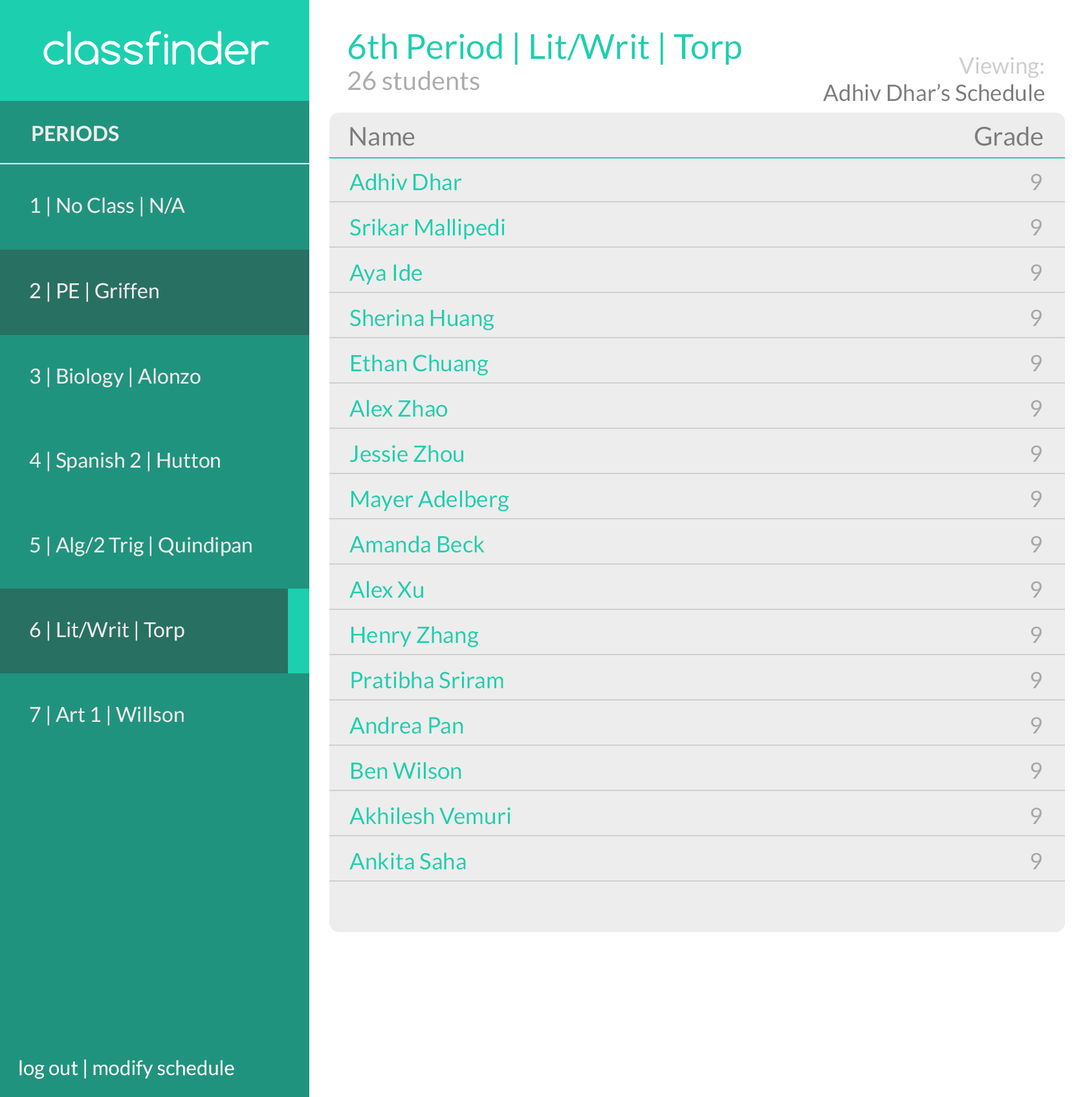
<style>
.page{position:relative;width:1087px;height:1097px;background:#ededed}
.page>*{position:absolute;margin:0}
.t1{font:34.3px "Lato-Regular";color:#1ccfaf}
.t2{font:25.9px "Lato-Regular";color:#acacac}
.t3{font:22.6px "Lato-Regular";color:#7c7c7c}
.t4{font:22.6px "Lato-Regular";color:#cdcdcd}
.t5{font:20.7px "Lato-Bold";color:#ededed}
.t6{font:25.9px "Lato-Regular";color:#7c7c7c}
.t7{font:22.6px "Lato-Regular";color:#1ccfaf}
.t8{font:22.6px "Lato-Regular";color:#a6a6a6}
.t9{font:20.7px "Lato-Regular";color:#ededed}
.t10{font:20.1px "Lato-Regular";color:#ffffff}
</style>
<div class="page">
<p class="t1" style="left:348px;top:32px;width:393px;height:59px">6th Period | Lit/Writ | Torp<br><span class="t2">26 students</span></p>
<p class="t3" style="left:823px;top:57px;width:221px;height:45px;text-align:right"><span class="t4">Viewing:<br></span>Adhiv Dhar’s Schedule</p>
<p class="t5" style="left:32px;top:126px;width:87px;height:16px">PERIODS</p>
<p class="t6" style="left:350px;top:126px;width:693px;height:20px">Name                            Grade</p>
<p class="t7" style="left:349px;top:173px;width:113px;height:18px">Adhiv Dhar</p>
<p class="t8" style="left:1031px;top:173px;width:11px;height:17px">9</p>
<p class="t9" style="left:31px;top:197px;width:154px;height:20px">1 | No Class | N/A</p>
<p class="t7" style="left:350px;top:219px;width:155px;height:20px">Srikar Mallipedi</p>
<p class="t8" style="left:1031px;top:219px;width:11px;height:16px">9</p>
<p class="t7" style="left:349px;top:264px;width:73px;height:21px">Aya Ide</p>
<p class="t8" style="left:1031px;top:264px;width:11px;height:17px">9</p>
<p class="t9" style="left:30px;top:282px;width:128px;height:20px">2 | PE | Griffen</p>
<p class="t7" style="left:350px;top:309px;width:144px;height:22px">Sherina Huang</p>
<p class="t8" style="left:1031px;top:309px;width:11px;height:17px">9</p>
<p class="t7" style="left:351px;top:355px;width:137px;height:21px">Ethan Chuang</p>
<p class="t8" style="left:1031px;top:355px;width:11px;height:16px">9</p>
<p class="t9" style="left:30px;top:367px;width:171px;height:21px">3 | Biology | Alonzo</p>
<p class="t7" style="left:349px;top:400px;width:99px;height:17px">Alex Zhao</p>
<p class="t8" style="left:1031px;top:400px;width:11px;height:17px">9</p>
<p class="t7" style="left:350px;top:445px;width:113px;height:18px">Jessie Zhou</p>
<p class="t8" style="left:1031px;top:445px;width:11px;height:17px">9</p>
<p class="t9" style="left:29px;top:452px;width:191px;height:20px">4 | Spanish 2 | Hutton</p>
<p class="t7" style="left:351px;top:490px;width:158px;height:22px">Mayer Adelberg</p>
<p class="t8" style="left:1031px;top:490px;width:11px;height:17px">9</p>
<p class="t9" style="left:30px;top:536px;width:222px;height:20px">5 | Alg/2 Trig | Quindipan</p>
<p class="t7" style="left:349px;top:536px;width:136px;height:17px">Amanda Beck</p>
<p class="t8" style="left:1031px;top:536px;width:11px;height:16px">9</p>
<p class="t7" style="left:349px;top:581px;width:74px;height:17px">Alex Xu</p>
<p class="t8" style="left:1031px;top:581px;width:11px;height:17px">9</p>
<p class="t9" style="left:30px;top:621px;width:154px;height:20px">6 | Lit/Writ | Torp</p>
<p class="t7" style="left:351px;top:626px;width:128px;height:22px">Henry Zhang</p>
<p class="t8" style="left:1031px;top:626px;width:11px;height:17px">9</p>
<p class="t7" style="left:351px;top:672px;width:152px;height:17px">Pratibha Sriram</p>
<p class="t8" style="left:1031px;top:672px;width:11px;height:16px">9</p>
<p class="t9" style="left:30px;top:706px;width:154px;height:20px">7 | Art 1 | Willson</p>
<p class="t7" style="left:349px;top:717px;width:114px;height:17px">Andrea Pan</p>
<p class="t8" style="left:1031px;top:717px;width:11px;height:17px">9</p>
<p class="t7" style="left:351px;top:762px;width:110px;height:18px">Ben Wilson</p>
<p class="t8" style="left:1031px;top:762px;width:11px;height:17px">9</p>
<p class="t7" style="left:349px;top:807px;width:161px;height:18px">Akhilesh Vemuri</p>
<p class="t8" style="left:1031px;top:807px;width:11px;height:17px">9</p>
<p class="t7" style="left:349px;top:853px;width:117px;height:17px">Ankita Saha</p>
<p class="t8" style="left:1031px;top:853px;width:11px;height:16px">9</p>
<p class="t10" style="left:19px;top:1060px;width:215px;height:19px">log out | modify schedule</p>
</div>
